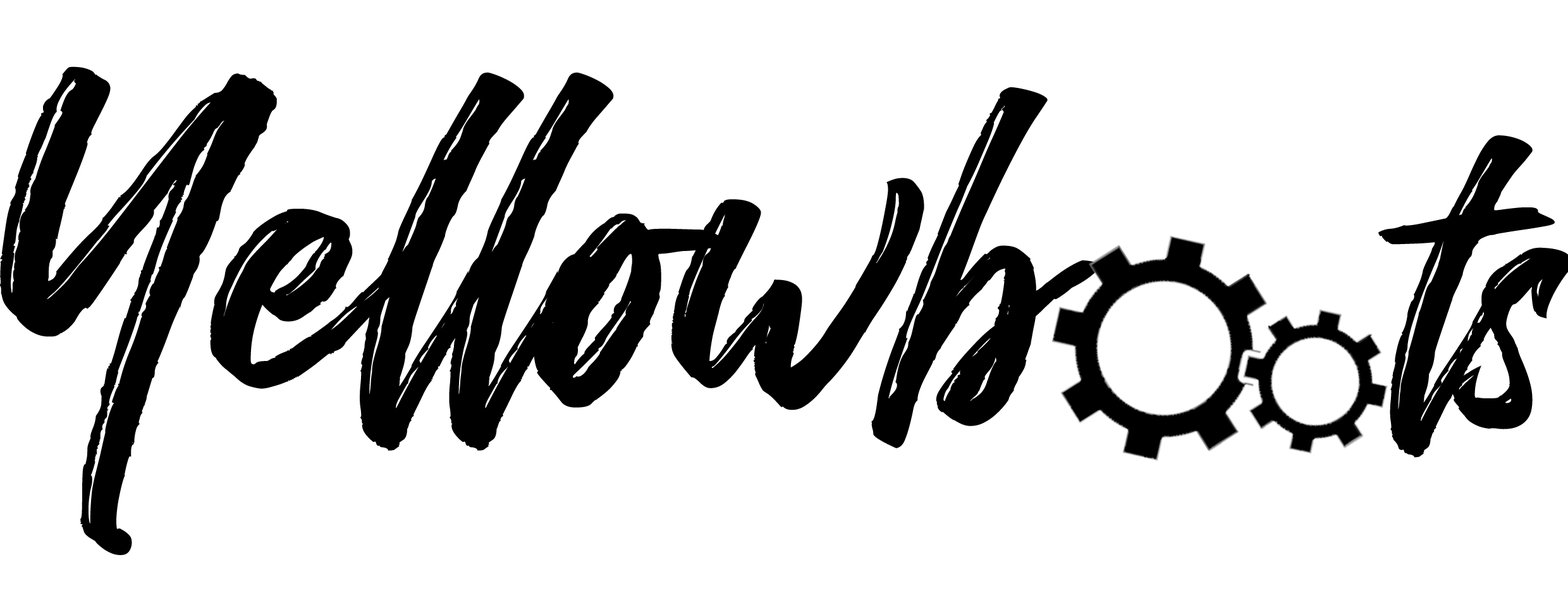
<style>
.page{position:relative;width:1568px;height:612px;background:#ffffff}
.page>*{position:absolute;margin:0}
.t1{font:472.9px "TheHistoriaDemo";color:#000000}
</style>
<div class="page">
<p class="t1" style="left:0px;top:66px;width:1099px;height:489px">Yellowb</p>
</div>
